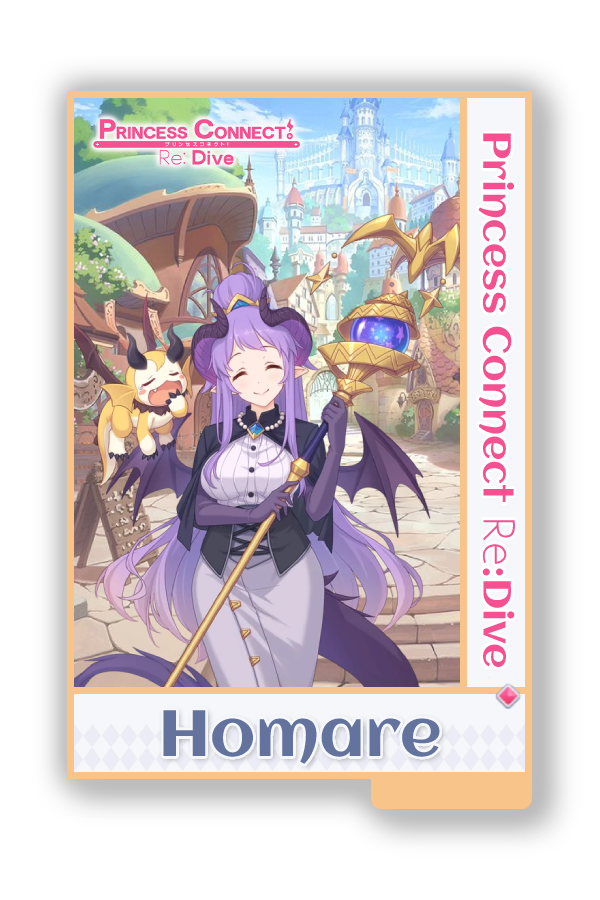
<style>
.page{position:relative;width:600px;height:900px;background:#ffffff}
.page>*{position:absolute;margin:0}
.t1{font:39px "Aclonica-Regular";color:#f55191}
.t2{font:39px "AaarghNormal";color:#f55191}
.t3{font:65px "Aclonica-Regular";color:#64739d}
</style>
<div class="page">
<p class="t1" style="left:478px;top:133px;width:38px;height:534px;rotate:90deg">Princess Connect <span class="t2">Re</span>:Dive</p>
<p class="t3" style="left:163px;top:710px;width:277px;height:54px">Homare</p>
</div>
